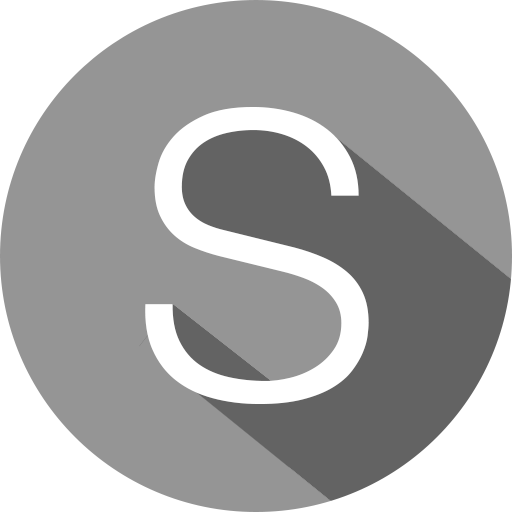
<style>
.page{position:relative;width:512px;height:512px;background:#959595}
.page>*{position:absolute;margin:0}
.t1{font:400px "HelveticaNeue-Light";color:#ffffff}
</style>
<div class="page">
<p class="t1" style="left:145px;top:107px;width:224px;height:297px">S</p>
</div>
